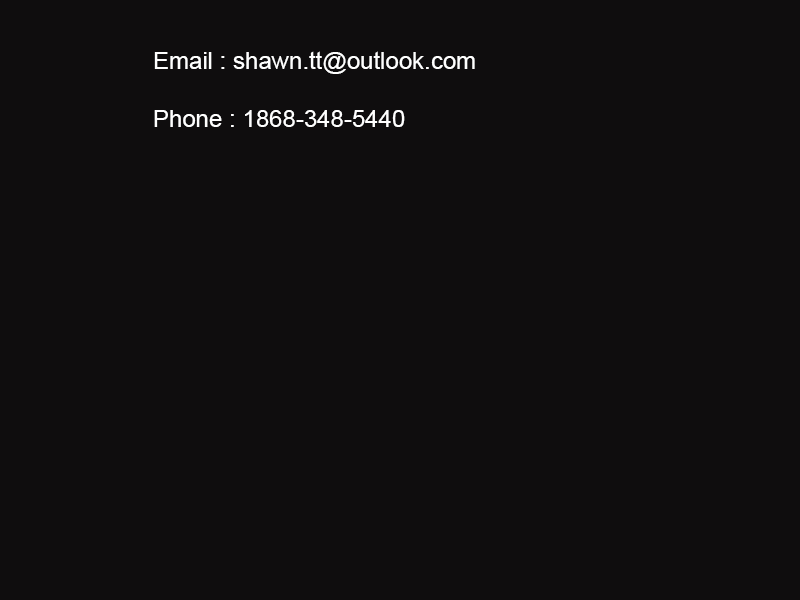
<style>
.page{position:relative;width:800px;height:600px;background:#0f0d0e}
.page>*{position:absolute;margin:0}
.t1{font:24px "ArialMT";color:#ffffff}
</style>
<div class="page">
<p class="t1" style="left:154px;top:51px;width:321px;height:76px">Email : shawn.tt@outlook.com<br><br>Phone : 1868-348-5440</p>
</div>
